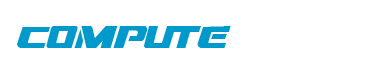
<style>
.page{position:relative;width:385px;height:71px;background:#ffffff}
.page>*{position:absolute;margin:0}
.t1{font:31px "DreamMMA";color:#0099cc}
</style>
<div class="page">
<p class="t1" style="left:17px;top:26px;width:214px;height:22px">compute</p>
</div>
